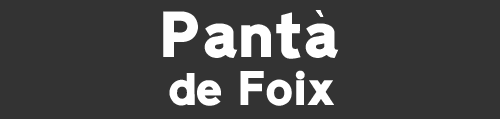
<style>
.page{position:relative;width:500px;height:119px;background:#333333}
.page>*{position:absolute;margin:0}
.t1{font:48px/48px "Ccrige-Regular";color:#ffffff}
.t2{font:64px/64px "Ccrige-Regular";color:#ffffff}
</style>
<div class="page">
<p class="t1" style="left:163px;top:11px;width:176px;height:95px;text-align:center"><span class="t2">Panta<br></span>de Foix</p>
</div>
